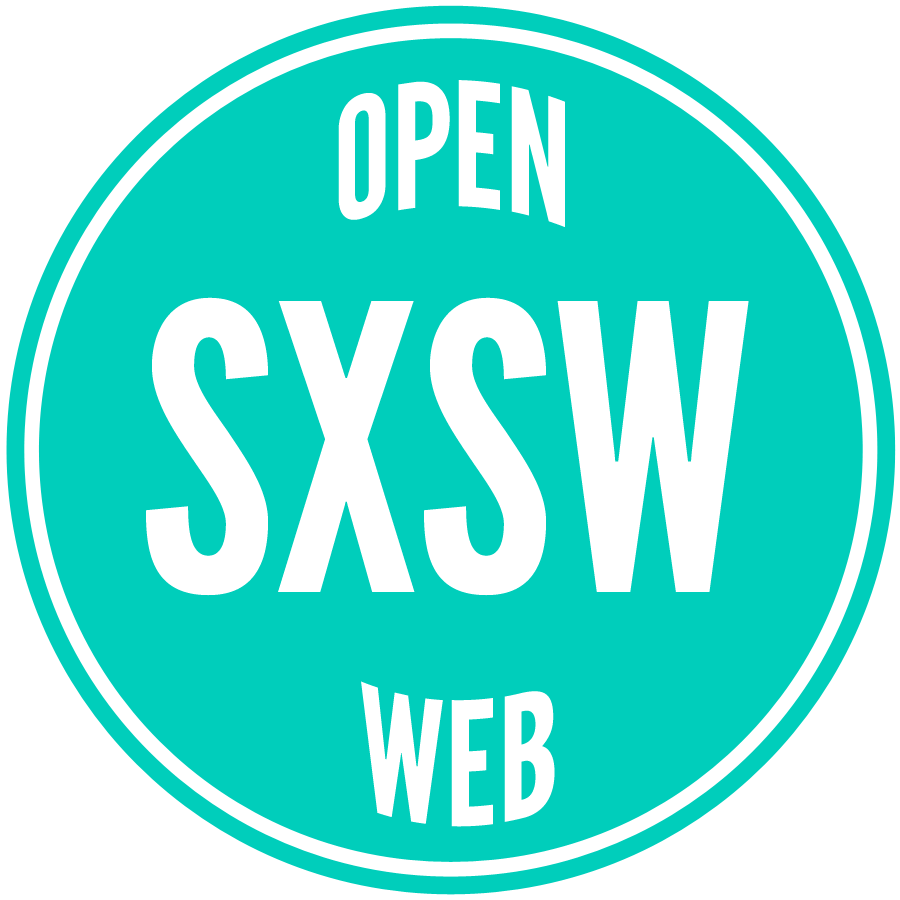
<style>
.page{position:relative;width:900px;height:900px;background:#00cebb}
.page>*{position:absolute;margin:0}
.t1{font:169.6px "LeagueGothic";color:#ffffff}
.t2{font:395.7px "LeagueGothic";color:#ffffff}
</style>
<div class="page">
<p class="t1" style="left:338px;top:80px;width:227px;height:147px">OPEN</p>
<p class="t2" style="left:146px;top:297px;width:603px;height:299px">SXSW</p>
<p class="t1" style="left:361px;top:681px;width:194px;height:146px">WEB</p>
</div>
